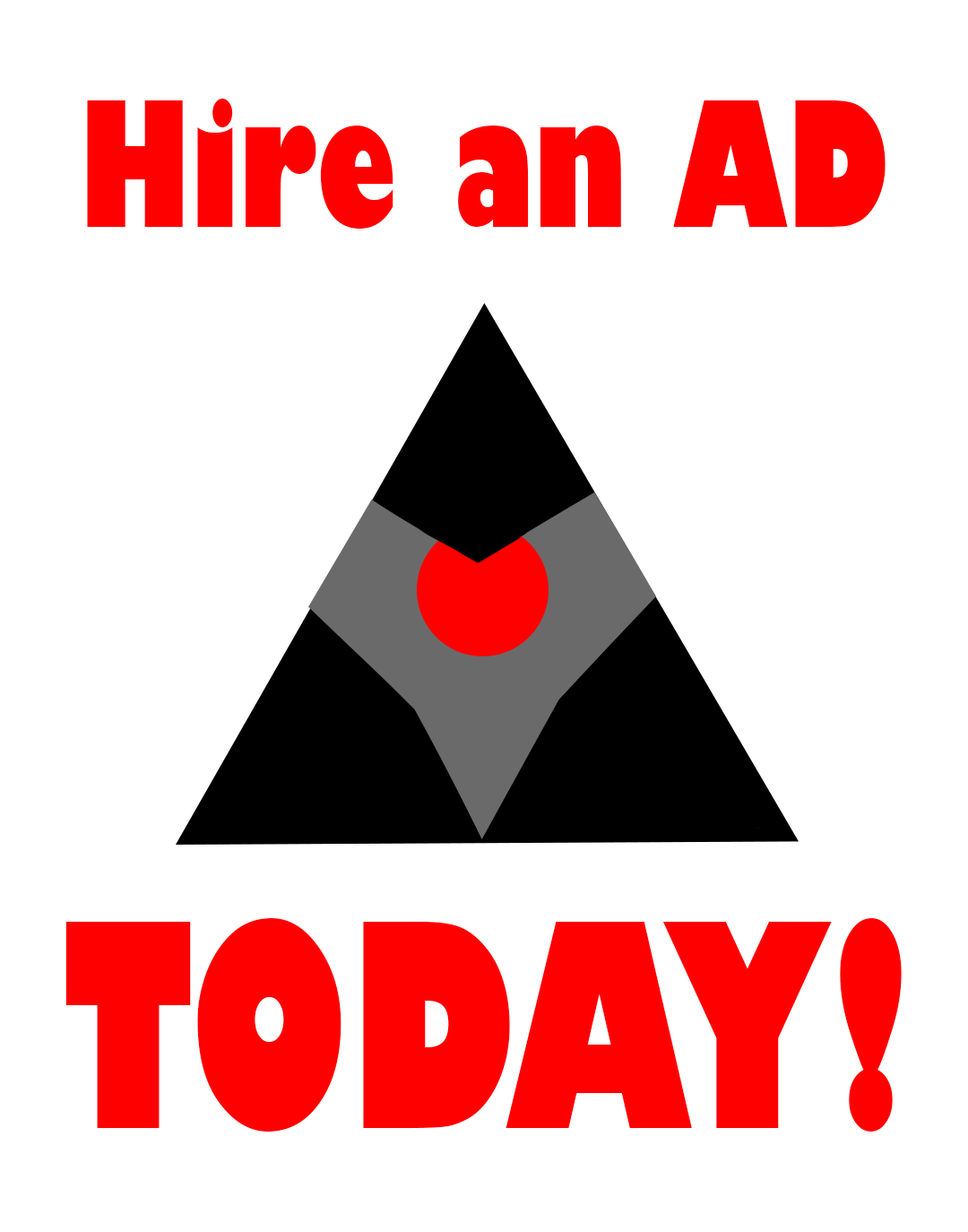
<style>
.page{position:relative;width:968px;height:1232px;background:#ffffff}
.page>*{position:absolute;margin:0}
.t1{font:169.4px "GillSans-UltraBoldCondensed";color:#ff0000}
.t2{font:276.2px "GillSans-UltraBoldCondensed";color:#ff0000}
</style>
<div class="page">
<p class="t1" style="left:87px;top:99px;width:799px;height:130px">Hire an AD</p>
<p class="t2" style="left:65px;top:918px;width:837px;height:213px">TODAY!</p>
</div>
